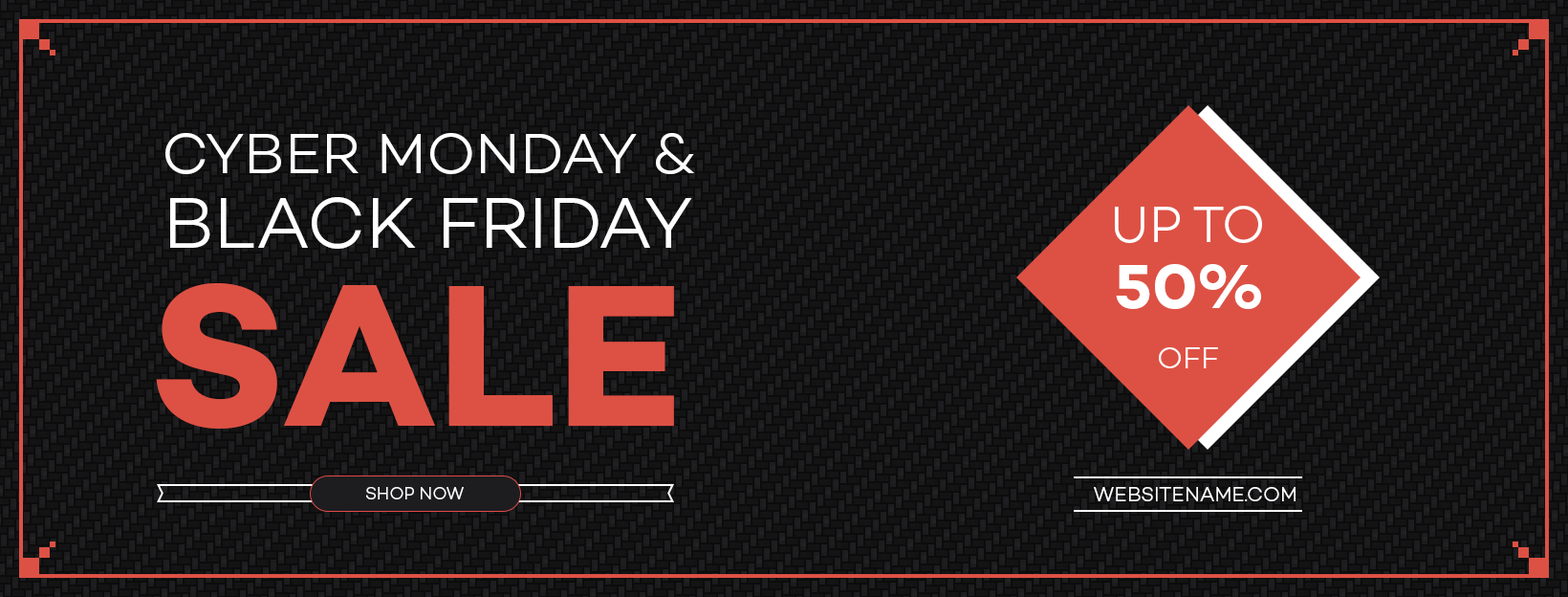
<style>
.page{position:relative;width:1568px;height:597px}
.page>*{position:absolute;margin:0}
.t1{font:58.3px/74.6px "Campton-LightDEMO";color:#ffffff;text-transform:uppercase}
.t2{font:72.7px/74.6px "Campton-LightDEMO";color:#ffffff;text-transform:uppercase}
.t3{font:51.6px "Campton-LightDEMO";color:#ffffff;text-transform:uppercase}
.t4{font:63.1px "Campton-BoldDEMO";color:#ffffff;text-transform:uppercase}
.t5{font:204.6px "Campton-BoldDEMO";color:#dd5144;text-transform:uppercase}
.t6{font:30.6px "Campton-LightDEMO";color:#ffffff;text-transform:uppercase}
.t7{font:17.2px "Campton-LightDEMO";color:#ffffff;text-transform:uppercase}
.t8{font:20.1px "Campton-LightDEMO";color:#ffffff;text-transform:uppercase}
</style>
<div class="page">
<p class="t1" style="left:165px;top:133px;width:529px;height:116px;text-align:center">Cyber monday &amp;<br><span class="t2">Black friday</span></p>
<p class="t3" style="left:1115px;top:206px;width:147px;height:37px">up to</p>
<p class="t4" style="left:1116px;top:264px;width:145px;height:45px">50%</p>
<p class="t5" style="left:156px;top:283px;width:518px;height:145px">Sale</p>
<p class="t6" style="left:1159px;top:347px;width:59px;height:21px">Off</p>
<p class="t7" style="left:366px;top:487px;width:98px;height:12px">Shop now</p>
<p class="t8" style="left:1094px;top:487px;width:202px;height:14px">Websitename.com</p>
</div>
